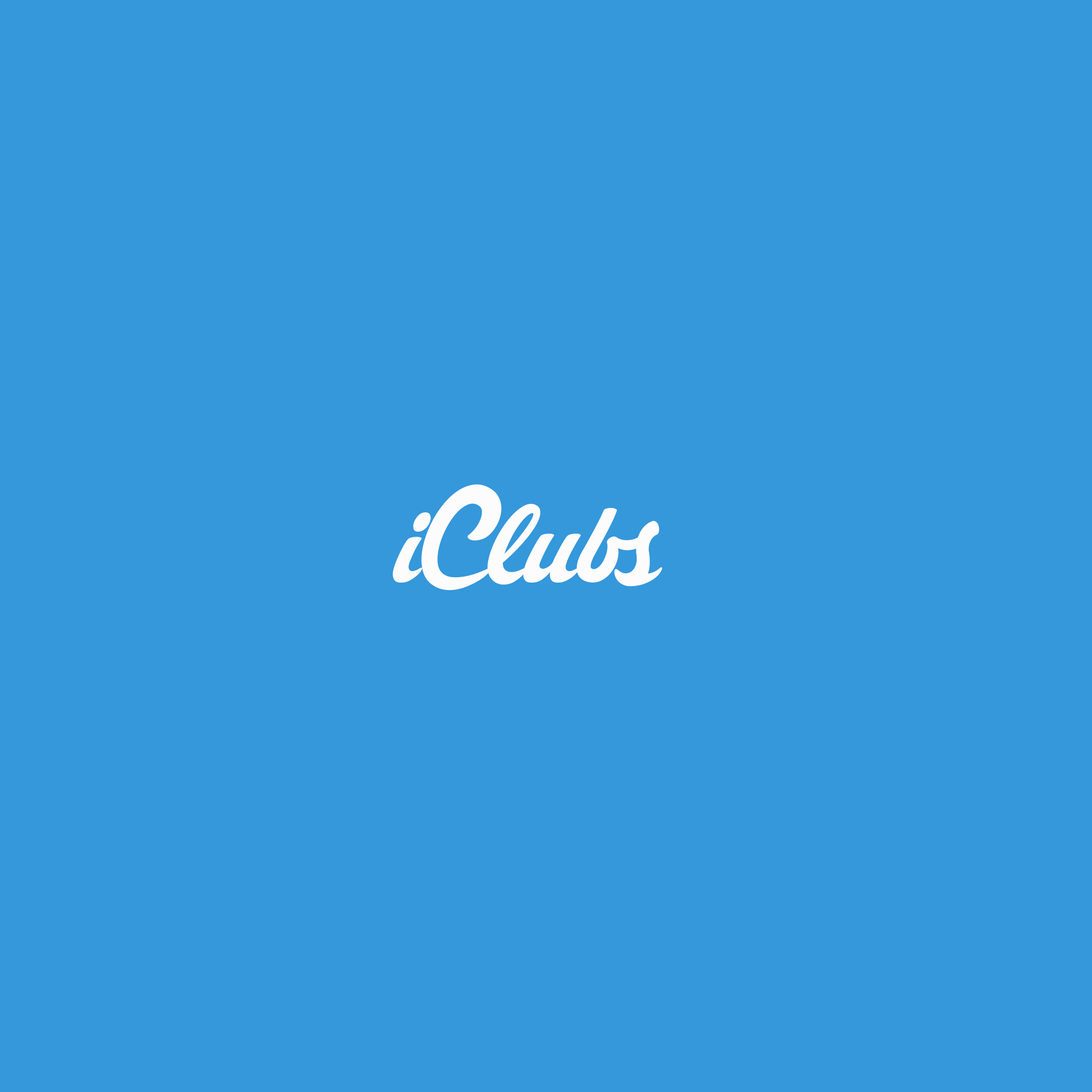
<style>
.page{position:relative;width:1092px;height:1092px;background:#3498db}
.page>*{position:absolute;margin:0}
.t1{font:148.4px "MastocPersonalUseOnly";color:#fcfcfc}
</style>
<div class="page">
<p class="t1" style="left:393px;top:484px;width:269px;height:107px">iClubs</p>
</div>
